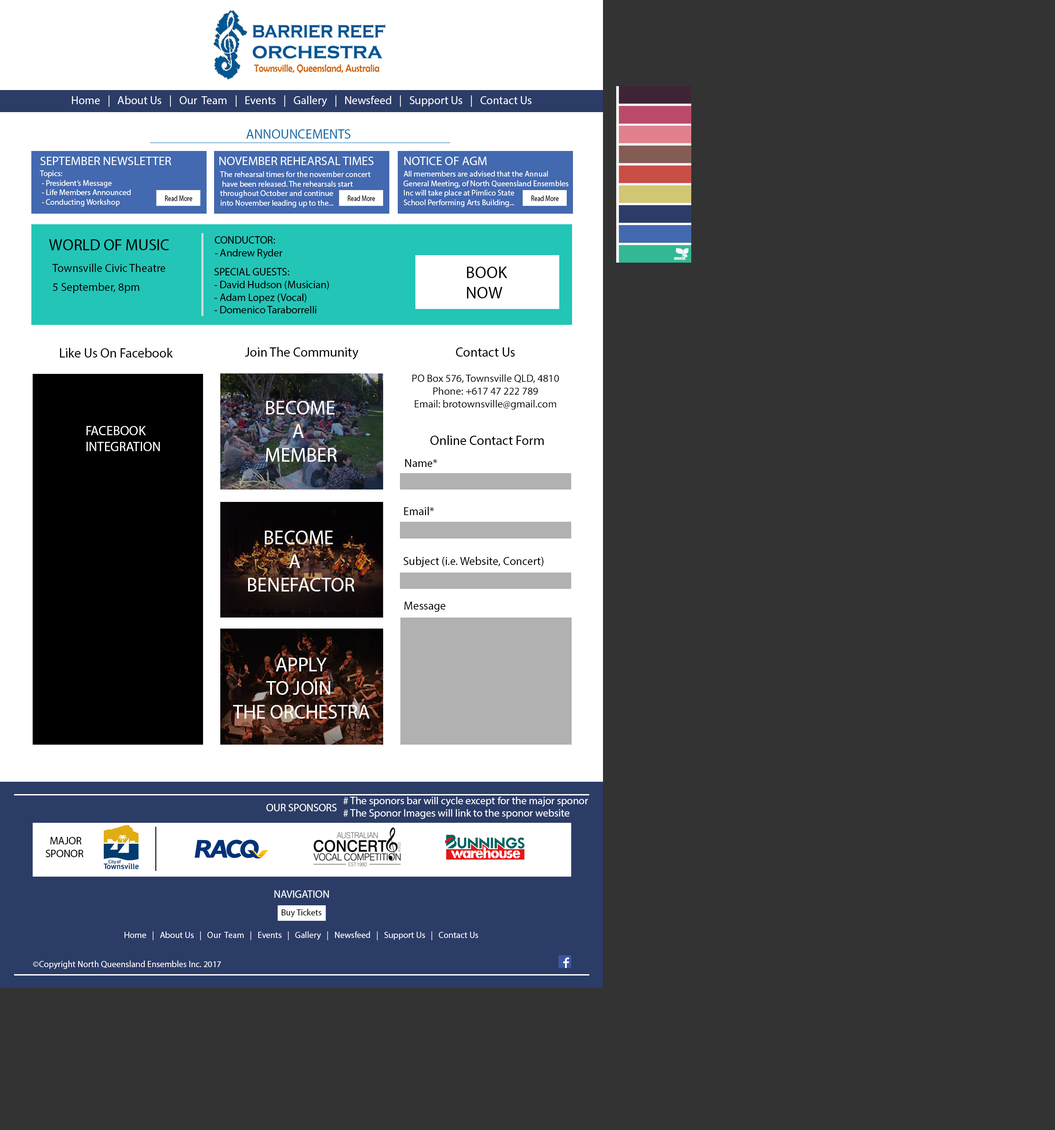
<style>
.page{position:relative;width:1055px;height:1130px;background:#333333}
.page>*{position:absolute;margin:0}
.t1{font:11.5px "MyriadPro-Regular";color:#ffffff}
.t2{font:13.2px "MyriadPro-Regular";color:#156ca9}
.t3{font:12.4px "MyriadPro-Regular";color:#ffffff}
.t4{font:7.9px "MyriadPro-Regular";color:#ffffff}
.t5{font:15.9px "MyriadPro-Regular";color:#000000}
.t6{font:10.6px "MyriadPro-Regular";color:#000000}
.t7{font:11.5px "MyriadPro-Regular";color:#000000}
.t8{font:16.7px "MyriadPro-Regular";color:#000000}
.t9{font:13.3px "MyriadPro-Regular";color:#000000}
.t10{font:13.2px "MyriadPro-Regular";color:#000000}
.t11{font:19.7px "MyriadPro-Regular";color:#ffffff}
.t12{font:13.2px "MyriadPro-Regular";color:#ffffff}
.t13{font:11.7px "MyriadPro-Regular";color:#000000}
.t14{font:10.6px "MyriadPro-Regular";color:#ffffff}
.t15{font:8.8px "MyriadPro-Regular";color:#000000}
.t16{font:8.8px "MyriadPro-Regular";color:#ffffff}
</style>
<div class="page">
<p class="t1" style="left:72px;top:95px;width:460px;height:12px">Home   |   About Us   |   Our  Team   |   Events   |   Gallery   |   Newsfeed   |   Support Us   |   Contact Us</p>
<p class="t2" style="left:246px;top:129px;width:105px;height:10px">ANNOUNCEMENTS</p>
<p class="t3" style="left:40px;top:157px;width:131px;height:8px">SEPTEMBER NEWSLETTER</p>
<p class="t3" style="left:219px;top:157px;width:154px;height:8px">NOVEMBER REHEARSAL TIMES</p>
<p class="t3" style="left:404px;top:157px;width:83px;height:8px">NOTICE OF AGM</p>
<p class="t4" style="left:40px;top:170px;width:91px;height:37px">Topics:<br> - President’s Message<br> - Life Members Announced<br> - Conducting Workshop</p>
<p class="t4" style="left:220px;top:171px;width:151px;height:36px">The rehearsal times for the november concert<br> have been released. The rehearsals start <br>throughout October and continue<br>into November leading up to the...</p>
<p class="t4" style="left:404px;top:171px;width:165px;height:36px">All memembers are advised that the Annual <br>General Meeting, of North Queensland Ensembles<br>Inc will take place at Pimlico State <br>School Performing Arts Building...</p>
<p class="t5" style="left:49px;top:239px;width:120px;height:11px">WORLD OF MUSIC</p>
<p class="t6" style="left:215px;top:236px;width:68px;height:23px">CONDUCTOR:<br>- Andrew Ryder</p>
<p class="t7" style="left:52px;top:264px;width:114px;height:29px">Townsville Civic Theatre<br><br>5 September, 8pm</p>
<p class="t6" style="left:214px;top:268px;width:115px;height:45px">SPECIAL GUESTS:<br>- David Hudson (Musician)<br>- Adam Lopez (Vocal)<br>- Domenico Taraborrelli</p>
<p class="t8" style="left:467px;top:267px;width:40px;height:31px">BOOK<br>NOW</p>
<p class="t9" style="left:60px;top:348px;width:113px;height:10px">Like Us On Facebook</p>
<p class="t10" style="left:245px;top:347px;width:113px;height:13px">Join The Community</p>
<p class="t10" style="left:456px;top:347px;width:59px;height:10px">Contact Us</p>
<p class="t6" style="left:412px;top:374px;width:147px;height:36px;text-align:center">PO Box 576, Townsville QLD, 4810<br>Phone: +617 47 222 789<br>Email: brotownsville@gmail.com</p>
<p class="t11" style="left:266px;top:401px;width:71px;height:61px">BECOME <br>    A <br>MEMBER</p>
<p class="t12" style="left:87px;top:426px;width:73px;height:25px">FACEBOOK<br>INTEGRATION</p>
<p class="t10" style="left:430px;top:435px;width:114px;height:10px">Online Contact Form</p>
<p class="t13" style="left:405px;top:459px;width:32px;height:8px">Name*</p>
<p class="t13" style="left:404px;top:507px;width:30px;height:8px">Email*</p>
<p class="t11" style="left:248px;top:531px;width:106px;height:61px">BECOME <br>     A <br>BENEFACTOR</p>
<p class="t13" style="left:404px;top:557px;width:139px;height:10px">Subject (i.e. Website, Concert)</p>
<p class="t13" style="left:404px;top:602px;width:41px;height:10px">Message</p>
<p class="t11" style="left:233px;top:658px;width:137px;height:61px">APPLY <br>   TO JOIN <br>THE ORCHESTRA</p>
<p class="t14" style="left:343px;top:797px;width:245px;height:22px"># The sponors bar will cycle except for the major sponor<br># The Sponor Images will link to the sponor website</p>
<p class="t14" style="left:266px;top:804px;width:71px;height:7px">OUR SPONSORS</p>
<p class="t6" style="left:45px;top:837px;width:38px;height:20px;text-align:center">MAJOR<br>SPONOR</p>
<p class="t14" style="left:274px;top:890px;width:55px;height:8px">NAVIGATION</p>
<p class="t15" style="left:282px;top:909px;width:39px;height:8px">Buy Tickets</p>
<p class="t16" style="left:124px;top:931px;width:354px;height:9px">Home   |   About Us   |   Our  Team   |   Events   |   Gallery   |   Newsfeed   |   Support Us   |   Contact Us</p>
<p class="t16" style="left:33px;top:961px;width:188px;height:8px">©Copyright North Queensland Ensembles Inc. 2017</p>
</div>
